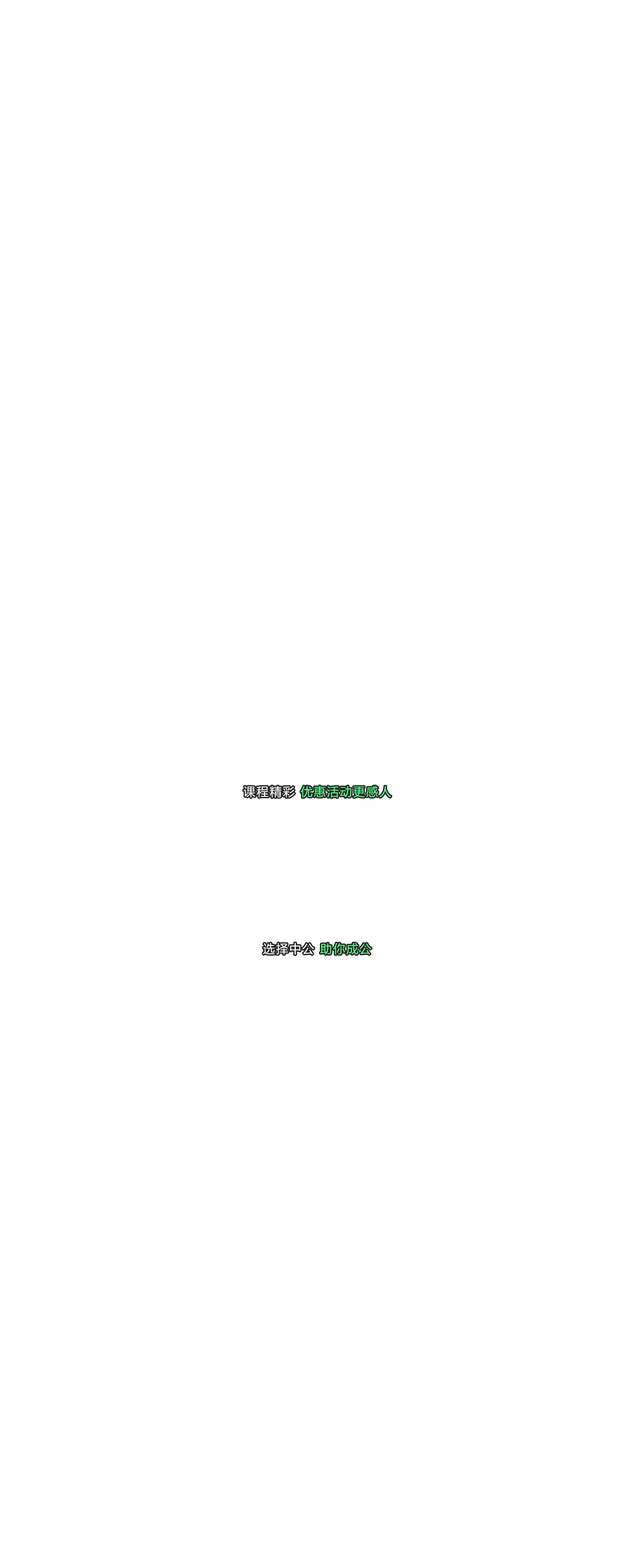
<style>
.page{position:relative;width:635px;height:1568px;background:#ffffff}
.page>*{position:absolute;margin:0}
.t1{font:11.9px "MicrosoftYaHei";letter-spacing:0.1em;color:#5efd8c}
.t2{font:11.9px "MicrosoftYaHei";letter-spacing:0.1em;color:#ffffff}
.t3{font:11.9px "MicrosoftYaHei";letter-spacing:0.1em;color:#5dfa8a}
</style>
<div class="page">
<p class="t1" style="left:243px;top:786px;width:148px;height:12px"><span class="t2">课程精彩 </span>优惠活动更感人</p>
<p class="t2" style="left:263px;top:943px;width:108px;height:12px">选择中公<span class="t3"> 助你成公</span></p>
</div>
